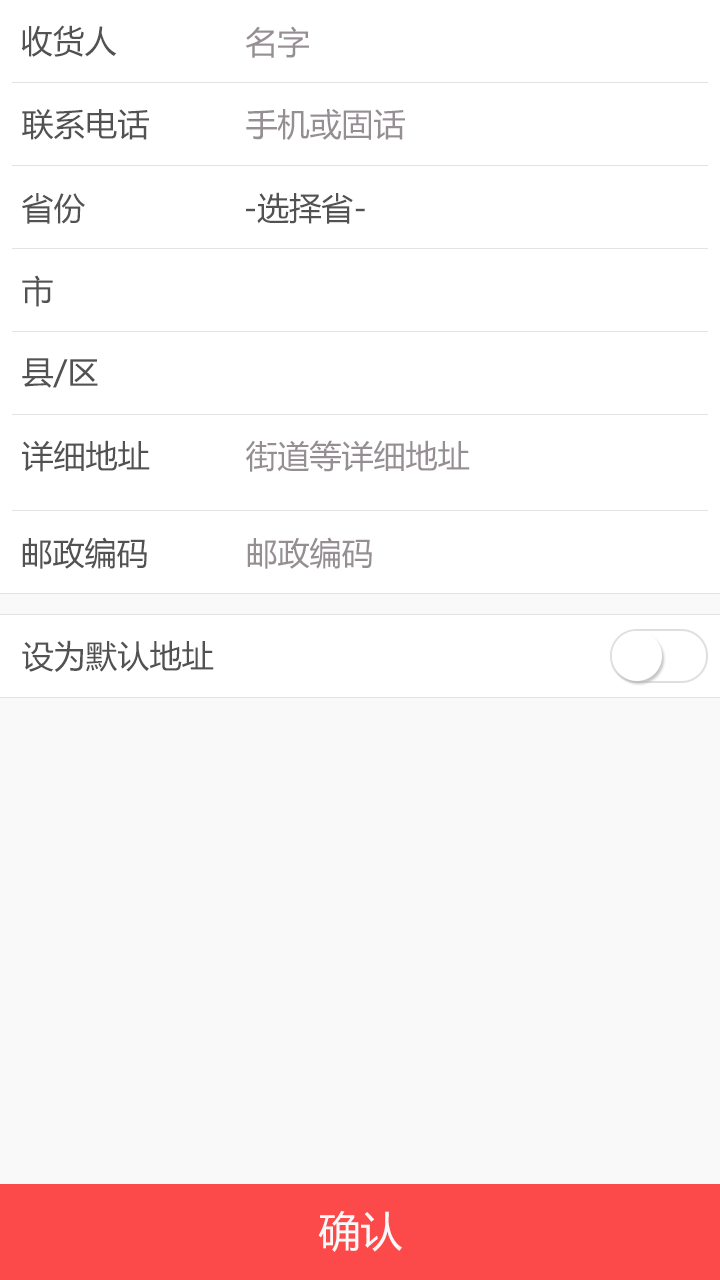
<style>
.page{position:relative;width:720px;height:1280px;background:#ffffff}
.page>*{position:absolute;margin:0}
.t1{font:32px "MicrosoftYaHei";color:#525252}
.t2{font:32px "MicrosoftYaHei";color:#958f93}
.t3{font:42px "MicrosoftYaHei";color:#f9f9f9}
</style>
<div class="page">
<p class="t1" style="left:21px;top:25px;width:96px;height:32px">收货人</p>
<p class="t2" style="left:245px;top:26px;width:64px;height:32px">名字</p>
<p class="t1" style="left:22px;top:109px;width:127px;height:31px">联系电话</p>
<p class="t2" style="left:246px;top:109px;width:159px;height:31px">手机或固话</p>
<p class="t1" style="left:22px;top:193px;width:63px;height:31px">省份</p>
<p class="t1" style="left:246px;top:192px;width:119px;height:32px">-选择省-</p>
<p class="t1" style="left:22px;top:275px;width:31px;height:32px">市</p>
<p class="t1" style="left:22px;top:358px;width:76px;height:30px">县/区</p>
<p class="t1" style="left:22px;top:440px;width:128px;height:32px">详细地址</p>
<p class="t2" style="left:246px;top:440px;width:224px;height:32px">街道等详细地址</p>
<p class="t1" style="left:22px;top:537px;width:125px;height:32px">邮政编码</p>
<p class="t2" style="left:247px;top:537px;width:125px;height:32px">邮政编码</p>
<p class="t1" style="left:22px;top:640px;width:192px;height:32px">设为默认地址</p>
<p class="t3" style="left:318px;top:1211px;width:84px;height:41px">确认</p>
</div>
